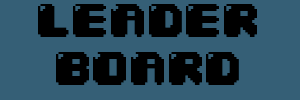
<style>
.page{position:relative;width:300px;height:100px;background:#355f76}
.page>*{position:absolute;margin:0}
.t1{font:40px "04b30";color:#000000}
</style>
<div class="page">
<p class="t1" style="left:38px;top:4px;width:219px;height:81px;text-align:center">LEADER<br>BOARD</p>
</div>
